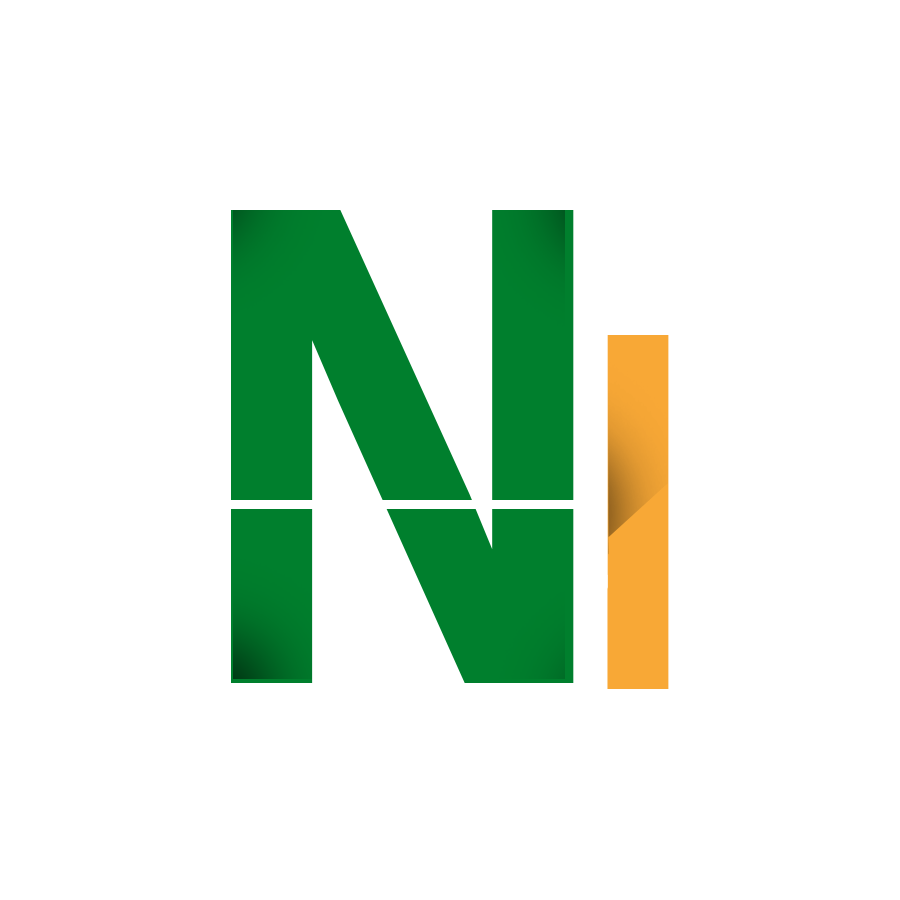
<style>
.page{position:relative;width:900px;height:900px;background:#ffffff}
.page>*{position:absolute;margin:0}
.t1{font:740.8px "Consolas-Bold";color:#007f2d}
</style>
<div class="page">
<p class="t1" style="left:231px;top:210px;width:343px;height:473px">N</p>
</div>
